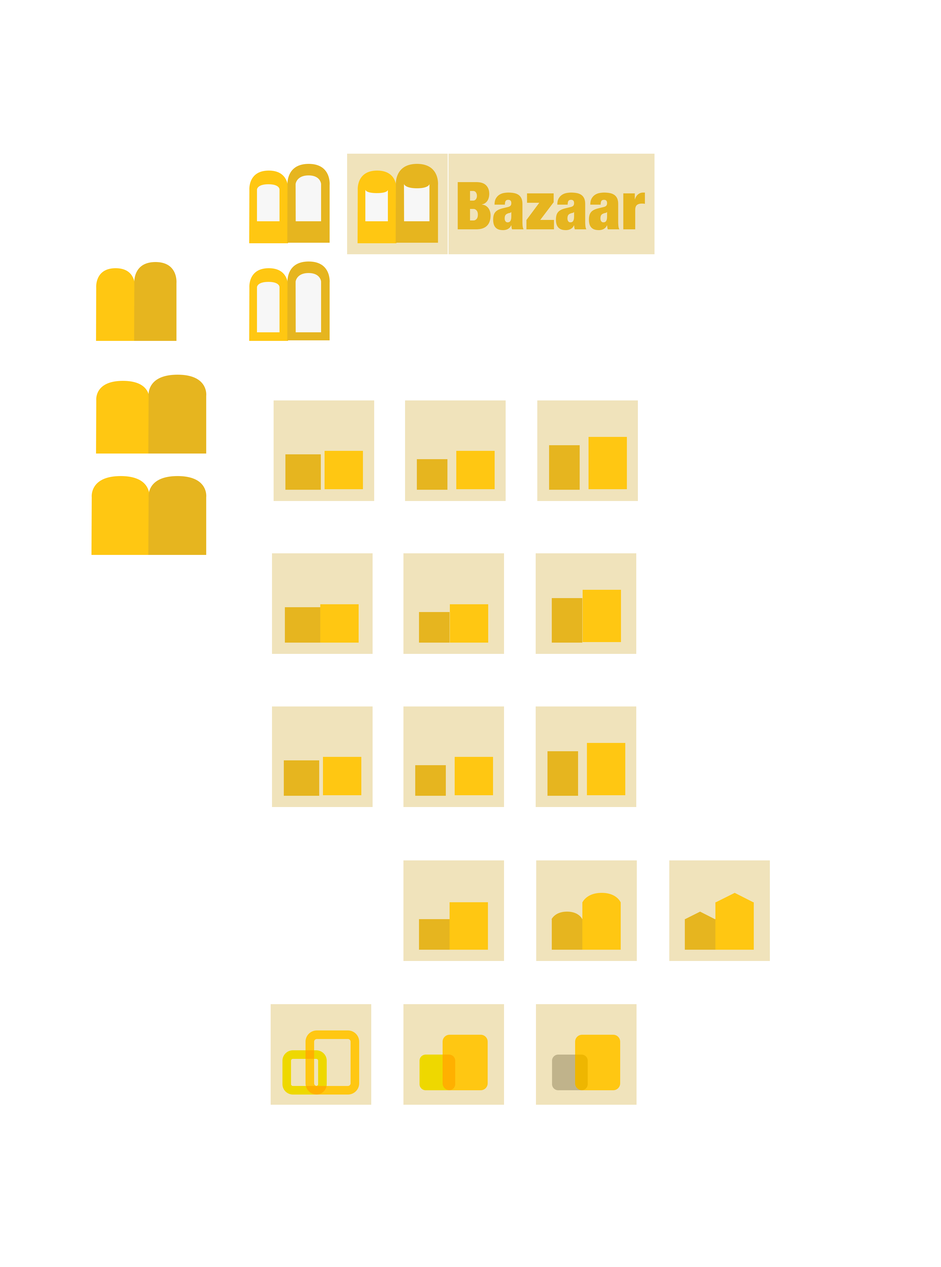
<style>
.page{position:relative;width:941px;height:1267px;background:#ffffff}
.page>*{position:absolute;margin:0}
.t1{font:66.3px "HelveticaNeue-CondensedBlack";color:#e6b51f}
</style>
<div class="page">
<p class="t1" style="left:458px;top:182px;width:187px;height:48px">Bazaar</p>
</div>
